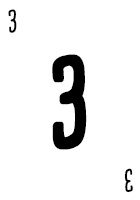
<style>
.page{position:relative;width:140px;height:200px;background:#ffffff}
.page>*{position:absolute;margin:0}
.t1{font:28.7px "CardenioModern-Reg";letter-spacing:-0.1em;color:#000000;text-transform:uppercase;font-weight:bold;scale:0.87 1}
.t2{font:115px "CardenioModern-Bold";letter-spacing:-0.1em;color:#000000;text-transform:uppercase;font-weight:bold;scale:0.87 1}
</style>
<div class="page">
<p class="t1" style="left:8px;top:9px;width:9px;height:24px">3</p>
<p class="t2" style="left:52px;top:54px;width:35px;height:96px">3</p>
<p class="t1" style="left:124px;top:168px;width:9px;height:25px;rotate:180deg">3</p>
</div>
